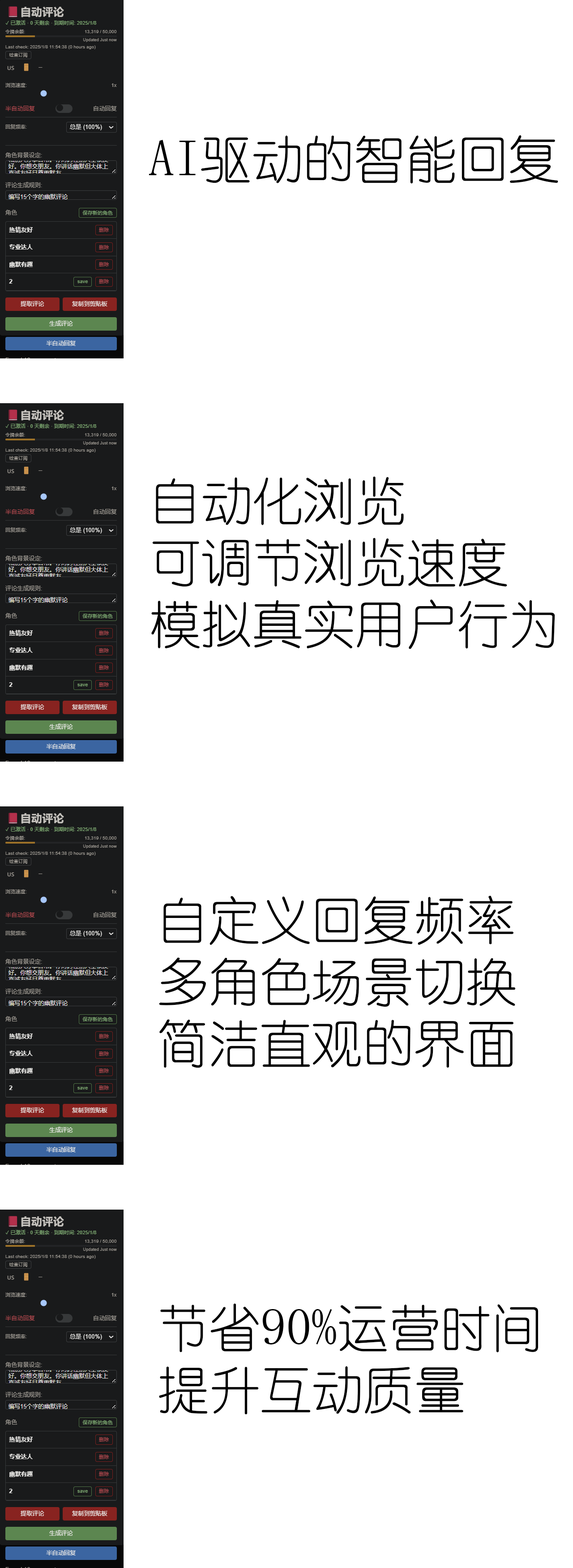
<style>
.page{position:relative;width:573px;height:1568px;background:#ffffff}
.page>*{position:absolute;margin:0}
.t1{font:51.4px "YouYuan";color:#000000}
</style>
<div class="page">
<p class="t1" style="left:149px;top:135px;width:410px;height:49px">AI驱动的智能回复</p>
<p class="t1" style="left:151px;top:476px;width:405px;height:420px">自动化浏览<br>可调节浏览速度<br>模拟真实用户行为<br><br><br><br>批量处理功能</p>
<p class="t1" style="left:159px;top:896px;width:357px;height:172px">自定义回复频率<br>多角色场景切换<br>简洁直观的界面</p>
<p class="t1" style="left:159px;top:1303px;width:380px;height:112px">节省90%运营时间<br>提升互动质量</p>
</div>
